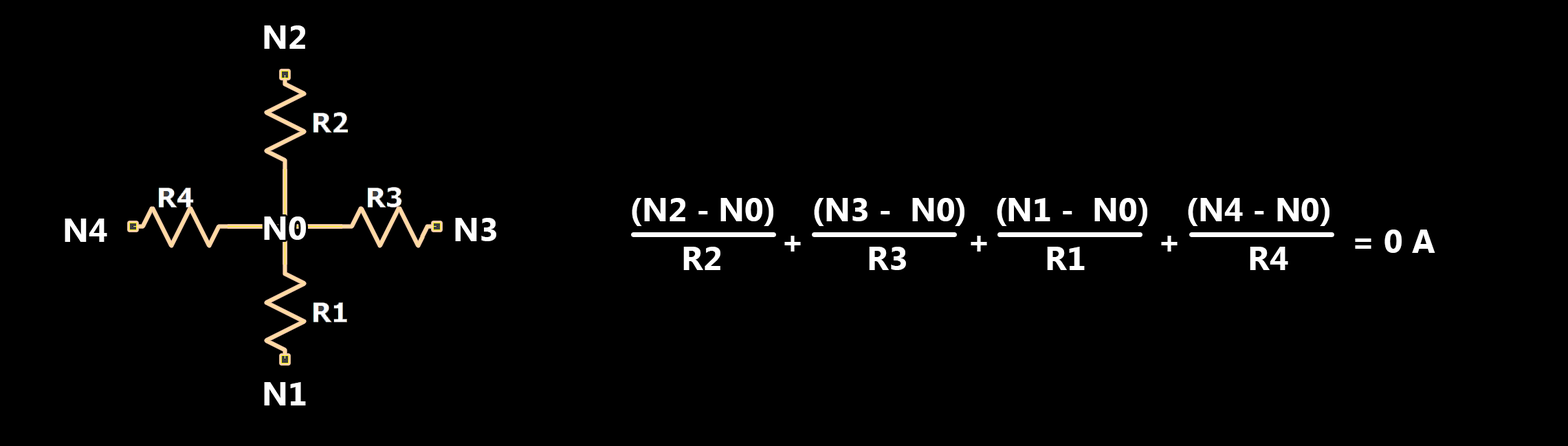
<style>
.page{position:relative;width:1568px;height:446px;background:#000000}
.page>*{position:absolute;margin:0}
.t1{font:33px "MyanmarText-Bold";color:#ffffff}
</style>
<div class="page">
<p class="t1" style="left:264px;top:25px;width:41px;height:24px">N2</p>
<p class="t1" style="left:632px;top:198px;width:697px;height:28px">(N2 - N0)    (N3 -  N0)   (N1 -  N0)    (N4 - N0)</p>
<p class="t1" style="left:65px;top:219px;width:42px;height:23px">N4</p>
<p class="t1" style="left:264px;top:217px;width:42px;height:23px">N0</p>
<p class="t1" style="left:455px;top:218px;width:41px;height:23px">N3</p>
<p class="t1" style="left:1355px;top:230px;width:80px;height:23px">= 0 A</p>
<p class="t1" style="left:784px;top:236px;width:17px;height:16px">+</p>
<p class="t1" style="left:971px;top:236px;width:16px;height:16px">+</p>
<p class="t1" style="left:1161px;top:236px;width:17px;height:16px">+</p>
<p class="t1" style="left:683px;top:247px;width:37px;height:23px">R2</p>
<p class="t1" style="left:869px;top:247px;width:37px;height:23px">R3</p>
<p class="t1" style="left:1047px;top:247px;width:38px;height:23px">R1</p>
<p class="t1" style="left:1250px;top:247px;width:38px;height:23px">R4</p>
<p class="t1" style="left:264px;top:382px;width:42px;height:24px">N1</p>
</div>
